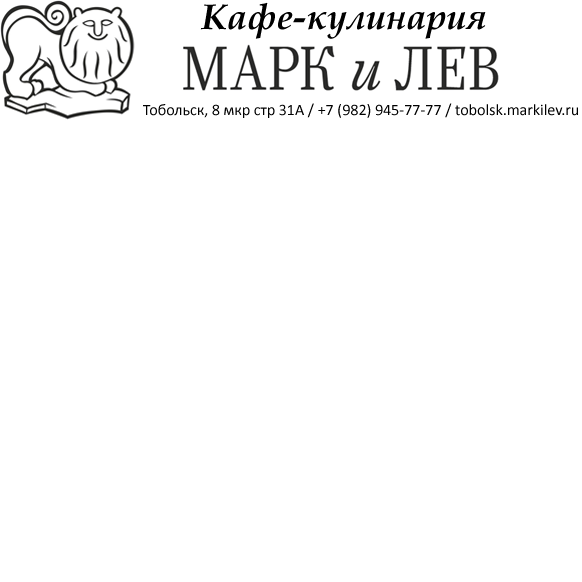
<style>
.page{position:relative;width:582px;height:582px;background:#ffffff}
.page>*{position:absolute;margin:0}
.t1{font:36px "BookAntiqua-BoldItalic";color:#000000}
.t2{font:16px "Calibri";color:#000000}
</style>
<div class="page">
<p class="t1" style="left:200px;top:2px;width:286px;height:37px">Кафе-кулинария</p>
<p class="t2" style="left:143px;top:103px;width:435px;height:15px">Тобольск, 8 мкр стр 31А / +7 (982) 945-77-77 / tobolsk.markilev.ru</p>
</div>
